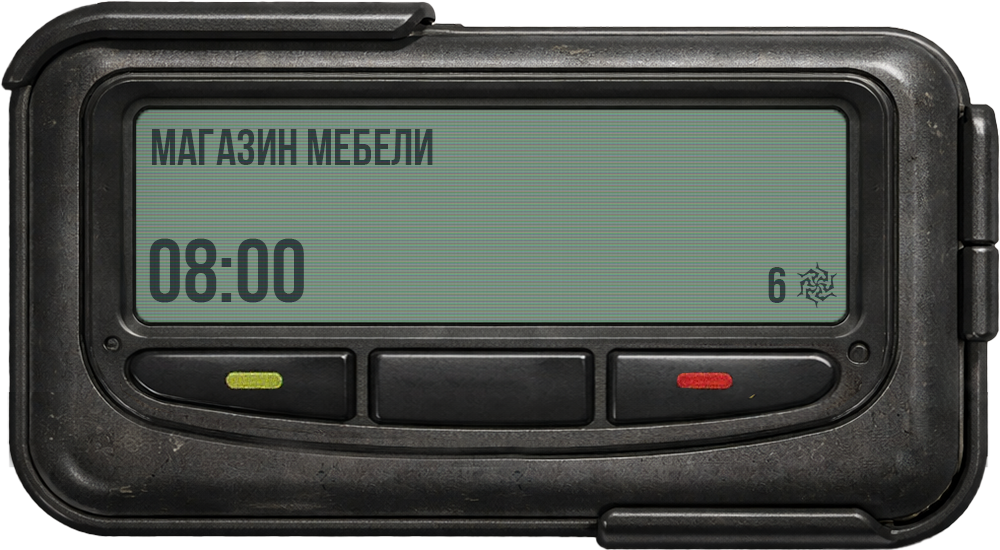
<style>
.page{position:relative;width:1000px;height:550px}
.page>*{position:absolute;margin:0}
.t1{font:50px "BebasNeueBold";color:#333e3d}
.t2{font:90px "BebasNeueBold";color:#303e3d}
.t3{font:50px "BebasNeueBold";color:#323e3e}
</style>
<div class="page">
<p class="t1" style="left:152px;top:129px;width:281px;height:36px">Магазин мебели</p>
<p class="t2" style="left:149px;top:238px;width:155px;height:65px">08:00</p>
<p class="t3" style="left:768px;top:267px;width:18px;height:36px">6</p>
</div>
